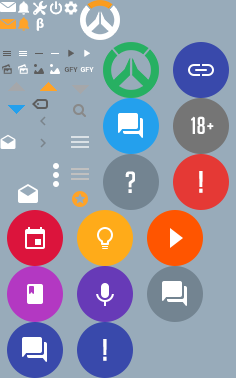
<style>
.page{position:relative;width:236px;height:378px;background:#98abba}
.page>*{position:absolute;margin:0}
.t1{font:14px "MyriadPro-Bold";color:#ffffff}
.t2{font:7px "Roboto-Bold";color:#5d5d5d}
.t3{font:7px "Roboto-Bold";color:#ffffff}
.t4{font:24px "BigNoodleTitling";color:#ffffff}
.t5{font:20px "BigNoodleTitling";color:#ffffff}
.t6{font:30px "BigNoodleTitling";color:#ffffff}
</style>
<div class="page">
<p class="t1" style="left:36px;top:18px;width:8px;height:13px">β</p>
<p class="t2" style="left:64px;top:67px;width:14px;height:5px">GFY</p>
<p class="t3" style="left:80px;top:67px;width:14px;height:5px">GFY</p>
<p class="t4" style="left:191px;top:116px;width:14px;height:18px">18</p>
<p class="t5" style="left:207px;top:123px;width:7px;height:7px">+</p>
<p class="t6" style="left:125px;top:171px;width:10px;height:22px">?</p>
<p class="t6" style="left:199px;top:171px;width:4px;height:22px">!</p>
<p class="t6" style="left:103px;top:339px;width:4px;height:22px">!</p>
</div>
